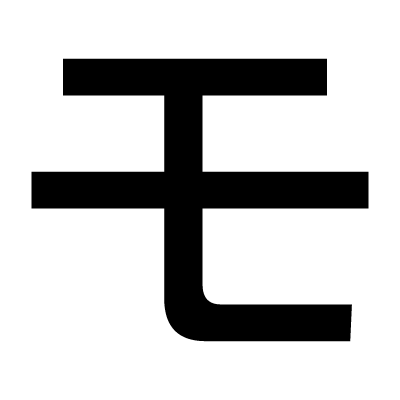
<style>
.page{position:relative;width:400px;height:400px;background:#ffffff}
.page>*{position:absolute;margin:0}
.t1{font:424.8px "MS-PGothic";color:#000000}
</style>
<div class="page">
<p class="t1" style="left:31px;top:58px;width:338px;height:284px">モ</p>
</div>
